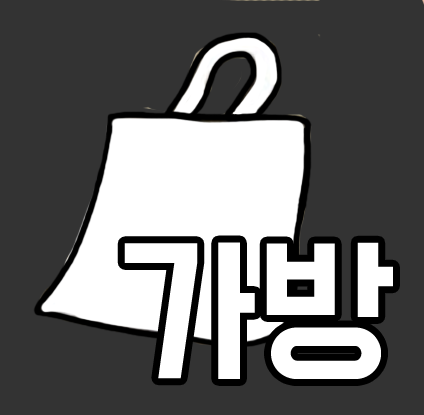
<style>
.page{position:relative;width:424px;height:415px;background:#333333}
.page>*{position:absolute;margin:0}
.t1{font:144px "BMDoHyeon";color:#ffffff}
</style>
<div class="page">
<p class="t1" style="left:124px;top:242px;width:269px;height:137px">가방</p>
</div>
